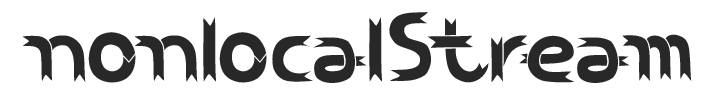
<style>
.page{position:relative;width:710px;height:96px;background:#ffffff}
.page>*{position:absolute;margin:0}
.t1{font:100px "BCSBenWood";color:#282828}
</style>
<div class="page">
<p class="t1" style="left:22px;top:12px;width:670px;height:71px">nonlocalStream</p>
</div>
